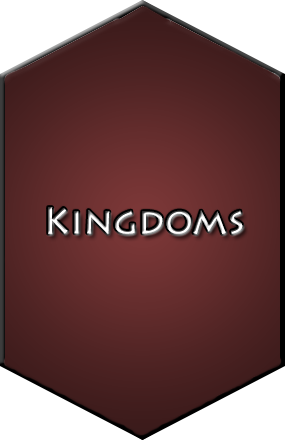
<style>
.page{position:relative;width:285px;height:440px}
.page>*{position:absolute;margin:0}
.t1{font:36px "LithosPro-Regular";font-weight:bold}
</style>
<div class="page">
<p class="t1" style="left:48px;top:207px;width:195px;height:27px">Kingdoms</p>
</div>
